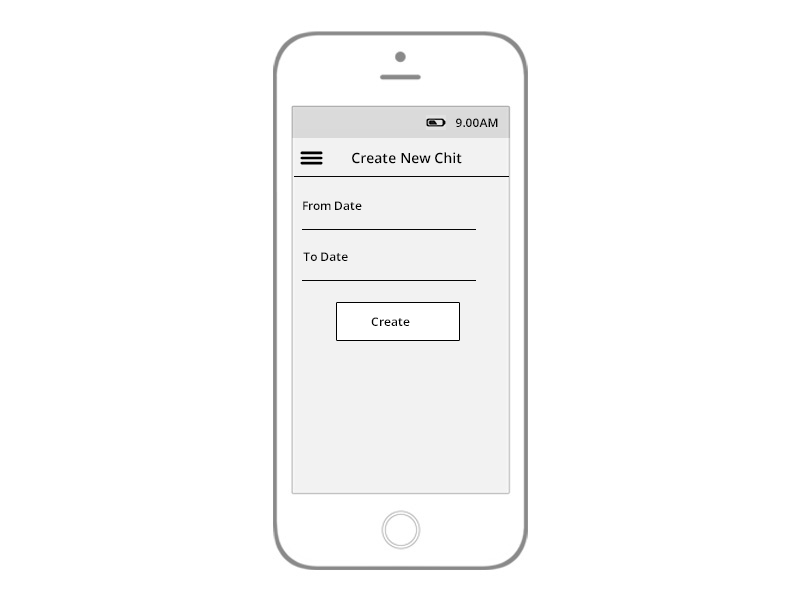
<style>
.page{position:relative;width:800px;height:600px;background:#ffffff}
.page>*{position:absolute;margin:0}
.t1{font:12px "OpenSans-Semibold";color:#030303}
.t2{font:14px "OpenSans-Semibold";color:#030303}
</style>
<div class="page">
<p class="t1" style="left:456px;top:118px;width:42px;height:9px">9.00AM</p>
<p class="t2" style="left:352px;top:152px;width:110px;height:12px">Create New Chit</p>
<p class="t1" style="left:303px;top:201px;width:59px;height:9px">From Date</p>
<p class="t1" style="left:303px;top:252px;width:45px;height:9px">To Date</p>
<p class="t1" style="left:371px;top:317px;width:39px;height:9px">Create</p>
</div>
